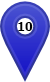
<style>
.page{position:relative;width:50px;height:82px;background:#ffffff}
.page>*{position:absolute;margin:0}
.t1{font:12px "Tahoma-Bold";color:#000000}
</style>
<div class="page">
<p class="t1" style="left:18px;top:22px;width:15px;height:9px">10</p>
</div>
